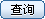
<style>
.page{position:relative;width:45px;height:19px;background:#e9f4ff}
.page>*{position:absolute;margin:0}
.t1{font:12px "SimSun";color:#000000}
</style>
<div class="page">
<p class="t1" style="left:11px;top:4px;width:23px;height:11px">查询</p>
</div>
